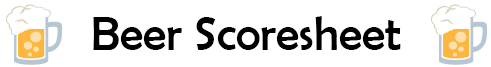
<style>
.page{position:relative;width:491px;height:67px;background:#ffffff}
.page>*{position:absolute;margin:0}
.t1{font:48px "BerlinSansFB-Reg";color:#000000}
</style>
<div class="page">
<p class="t1" style="left:93px;top:16px;width:308px;height:34px">Beer Scoresheet</p>
</div>
